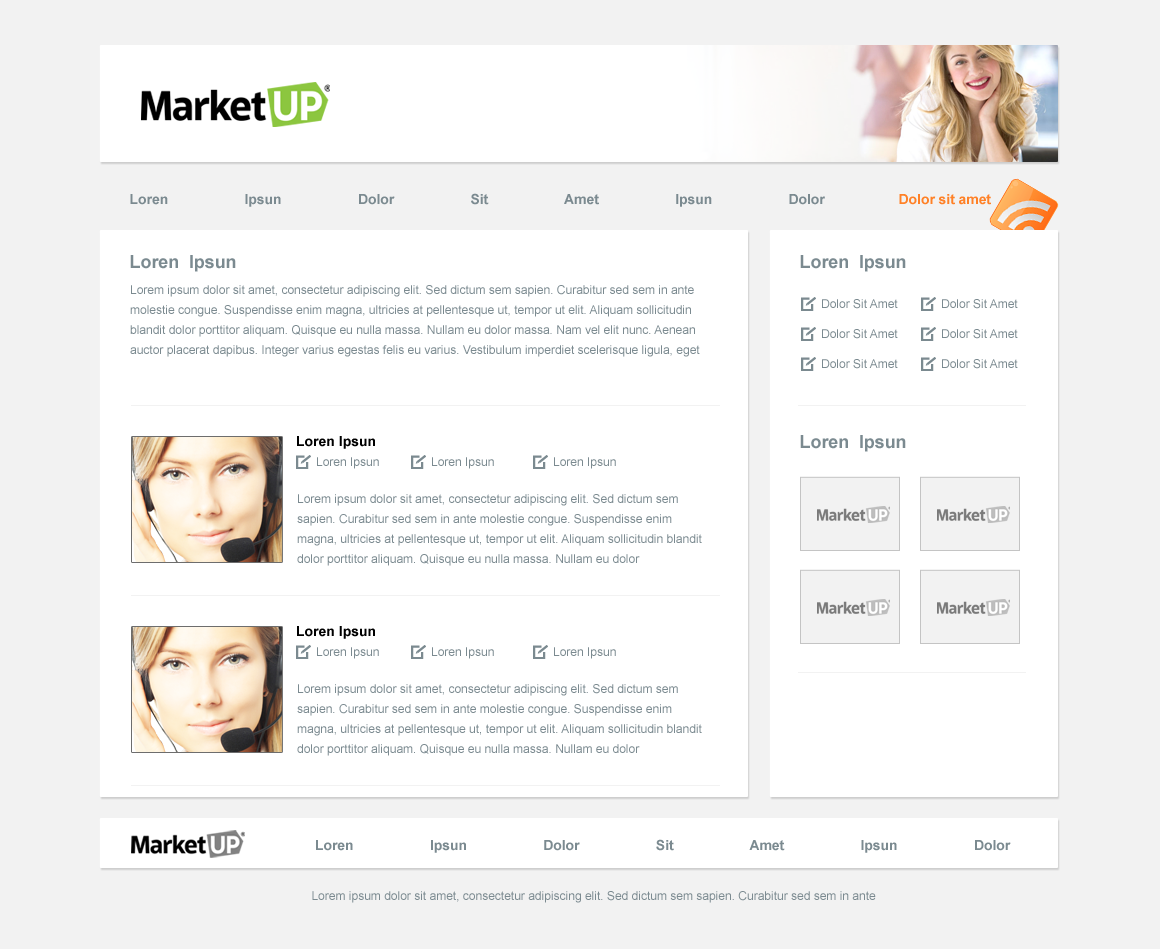
<style>
.page{position:relative;width:1160px;height:949px;background:#ffffff}
.page>*{position:absolute;margin:0}
.t1{font:14px "Arial-BoldMT";letter-spacing:-0.005em;color:#7b8a90}
.t2{font:14px "Arial-BoldMT";letter-spacing:-0.005em;color:#ff8127}
.t3{font:18px "Arial-BoldMT";letter-spacing:-0.005em;color:#7b8a90}
.t4{font:12px/20px "ArialMT";color:#7b8a90}
.t5{font:12px "ArialMT";color:#7b8a90}
.t6{font:14px "Arial-BoldMT";color:#000000}
</style>
<div class="page">
<p class="t1" style="left:130px;top:193px;width:695px;height:14px">Loren                    Ipsun                    Dolor                    Sit                    Amet                    Ipsun                    Dolor</p>
<p class="t2" style="left:899px;top:194px;width:92px;height:11px">Dolor sit amet</p>
<p class="t3" style="left:130px;top:255px;width:106px;height:17px">Loren  Ipsun</p>
<p class="t3" style="left:800px;top:255px;width:106px;height:17px">Loren  Ipsun</p>
<p class="t4" style="left:130px;top:285px;width:570px;height:72px">Lorem ipsum dolor sit amet, consectetur adipiscing elit. Sed dictum sem sapien. Curabitur sed sem in ante molestie congue. Suspendisse enim magna, ultricies at pellentesque ut, tempor ut elit. Aliquam sollicitudin blandit dolor porttitor aliquam. Quisque eu nulla massa. Nullam eu dolor massa. Nam vel elit nunc. Aenean auctor placerat dapibus. Integer varius egestas felis eu varius. Vestibulum imperdiet scelerisque ligula, eget</p>
<p class="t5" style="left:822px;top:299px;width:76px;height:10px">Dolor Sit Amet</p>
<p class="t5" style="left:942px;top:299px;width:76px;height:10px">Dolor Sit Amet</p>
<p class="t5" style="left:822px;top:329px;width:76px;height:10px">Dolor Sit Amet</p>
<p class="t5" style="left:942px;top:329px;width:76px;height:10px">Dolor Sit Amet</p>
<p class="t5" style="left:822px;top:359px;width:76px;height:10px">Dolor Sit Amet</p>
<p class="t5" style="left:942px;top:359px;width:76px;height:10px">Dolor Sit Amet</p>
<p class="t6" style="left:297px;top:436px;width:78px;height:13px">Loren Ipsun</p>
<p class="t3" style="left:800px;top:435px;width:106px;height:17px">Loren  Ipsun</p>
<p class="t5" style="left:317px;top:457px;width:62px;height:12px">Loren Ipsun</p>
<p class="t5" style="left:432px;top:457px;width:62px;height:12px">Loren Ipsun</p>
<p class="t5" style="left:554px;top:457px;width:62px;height:12px">Loren Ipsun</p>
<p class="t4" style="left:297px;top:494px;width:405px;height:72px">Lorem ipsum dolor sit amet, consectetur adipiscing elit. Sed dictum sem sapien. Curabitur sed sem in ante molestie congue. Suspendisse enim magna, ultricies at pellentesque ut, tempor ut elit. Aliquam sollicitudin blandit dolor porttitor aliquam. Quisque eu nulla massa. Nullam eu dolor</p>
<p class="t6" style="left:297px;top:626px;width:78px;height:13px">Loren Ipsun</p>
<p class="t5" style="left:317px;top:647px;width:62px;height:12px">Loren Ipsun</p>
<p class="t5" style="left:432px;top:647px;width:62px;height:12px">Loren Ipsun</p>
<p class="t5" style="left:554px;top:647px;width:62px;height:12px">Loren Ipsun</p>
<p class="t4" style="left:297px;top:684px;width:405px;height:72px">Lorem ipsum dolor sit amet, consectetur adipiscing elit. Sed dictum sem sapien. Curabitur sed sem in ante molestie congue. Suspendisse enim magna, ultricies at pellentesque ut, tempor ut elit. Aliquam sollicitudin blandit dolor porttitor aliquam. Quisque eu nulla massa. Nullam eu dolor</p>
<p class="t1" style="left:316px;top:839px;width:695px;height:14px">Loren                    Ipsun                    Dolor                    Sit                    Amet                    Ipsun                    Dolor</p>
<p class="t5" style="left:312px;top:891px;width:564px;height:12px">Lorem ipsum dolor sit amet, consectetur adipiscing elit. Sed dictum sem sapien. Curabitur sed sem in ante</p>
</div>
